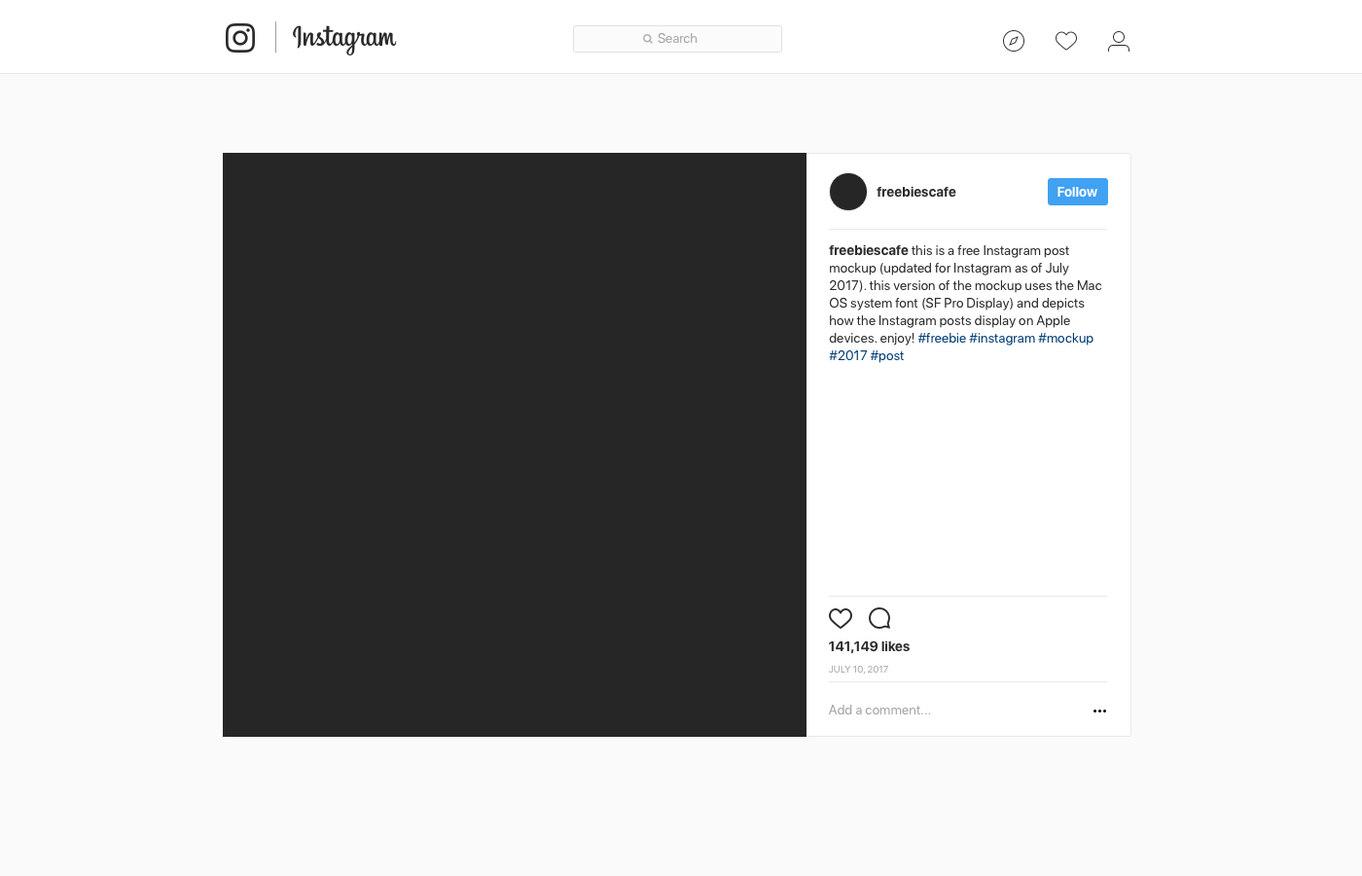
<style>
.page{position:relative;width:1362px;height:876px;background:#fafafa}
.page>*{position:absolute;margin:0}
.t1{font:13.6px "SFProDisplay-Regular";color:#a3a3a3}
.t2{font:13.6px "SFProDisplay-Bold";letter-spacing:0.01em;color:#2b2b2b}
.t3{font:13.6px "SFProDisplay-Bold";color:#ffffff}
.t4{font:13.6px/17.5px "SFProDisplay-Regular";letter-spacing:0.01em;color:#2b2b2b}
.t5{font:13.6px/17.5px "SFProDisplay-Bold";letter-spacing:0.01em;color:#2b2b2b}
.t6{font:13.6px/17.5px "SFProDisplay-Regular";letter-spacing:0.01em;color:#013c74}
.t7{font:9.7px "SFProDisplay-Regular";letter-spacing:0.01em;color:#a3a3a3;text-transform:uppercase}
.t8{font:13.6px "SFProDisplay-Regular";letter-spacing:0.01em;color:#a4a4a4}
</style>
<div class="page">
<p class="t1" style="left:658px;top:32px;width:40px;height:12px">Search</p>
<p class="t2" style="left:877px;top:186px;width:79px;height:11px">freebiescafe</p>
<p class="t3" style="left:1057px;top:187px;width:40px;height:10px">Follow</p>
<p class="t4" style="left:829px;top:244px;width:273px;height:119px;text-align:right"><span class="t5">freebiescafe </span>this is a free Instagram post mockup (updated for Instagram as of July 2017). this version of the mockup uses the Mac OS system font (SF Pro Display) and depicts how the Instagram posts display on Apple devices. enjoy! <span class="t6">#freebie #instagram #mockup #2017 #post</span></p>
<p class="t2" style="left:829px;top:640px;width:81px;height:14px">141,149 likes</p>
<p class="t7" style="left:829px;top:664px;width:59px;height:10px">july 10, 2017</p>
<p class="t8" style="left:828px;top:704px;width:103px;height:11px">Add a comment...</p>
</div>
